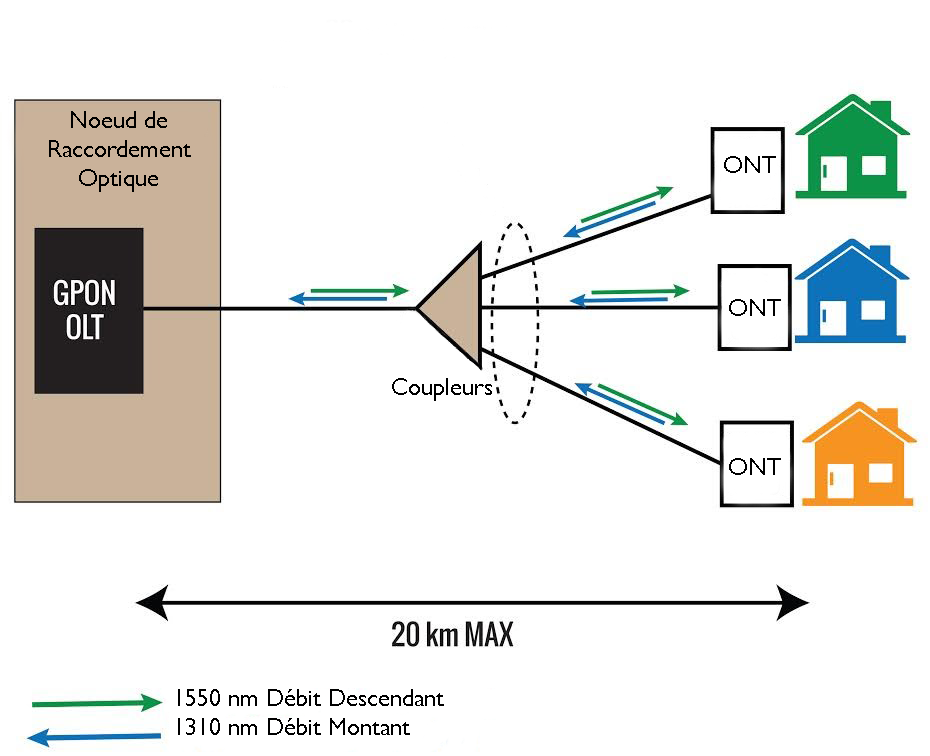
<style>
.page{position:relative;width:930px;height:756px;background:#ffffff}
.page>*{position:absolute;margin:0}
.t1{font:24px "GillSansMT";color:#000000}
</style>
<div class="page">
<p class="t1" style="left:49px;top:111px;width:142px;height:81px;text-align:center">Noeud de Raccordement Optique</p>
<p class="t1" style="left:724px;top:156px;width:52px;height:17px">ONT</p>
<p class="t1" style="left:729px;top:299px;width:52px;height:17px">ONT</p>
<p class="t1" style="left:392px;top:378px;width:100px;height:23px">Coupleurs</p>
<p class="t1" style="left:729px;top:458px;width:52px;height:17px">ONT</p>
<p class="t1" style="left:178px;top:689px;width:266px;height:46px">1550 nm Débit Descendant<br>1310 nm Débit Montant</p>
</div>
